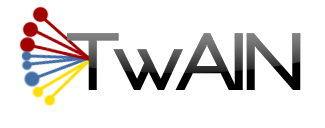
<style>
.page{position:relative;width:325px;height:128px;background:#ffffff}
.page>*{position:absolute;margin:0}
.t1{font:83.6px "WalkwayBlack"}
</style>
<div class="page">
<p class="t1" style="left:67px;top:33px;width:234px;height:57px">TwAIN</p>
</div>
